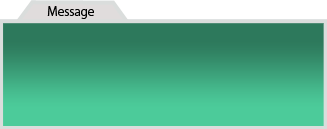
<style>
.page{position:relative;width:327px;height:129px}
.page>*{position:absolute;margin:0}
.t1{font:12px "KozGoPr6N-Regular";color:#020202}
</style>
<div class="page">
<p class="t1" style="left:47px;top:6px;width:47px;height:13px">Message</p>
</div>
